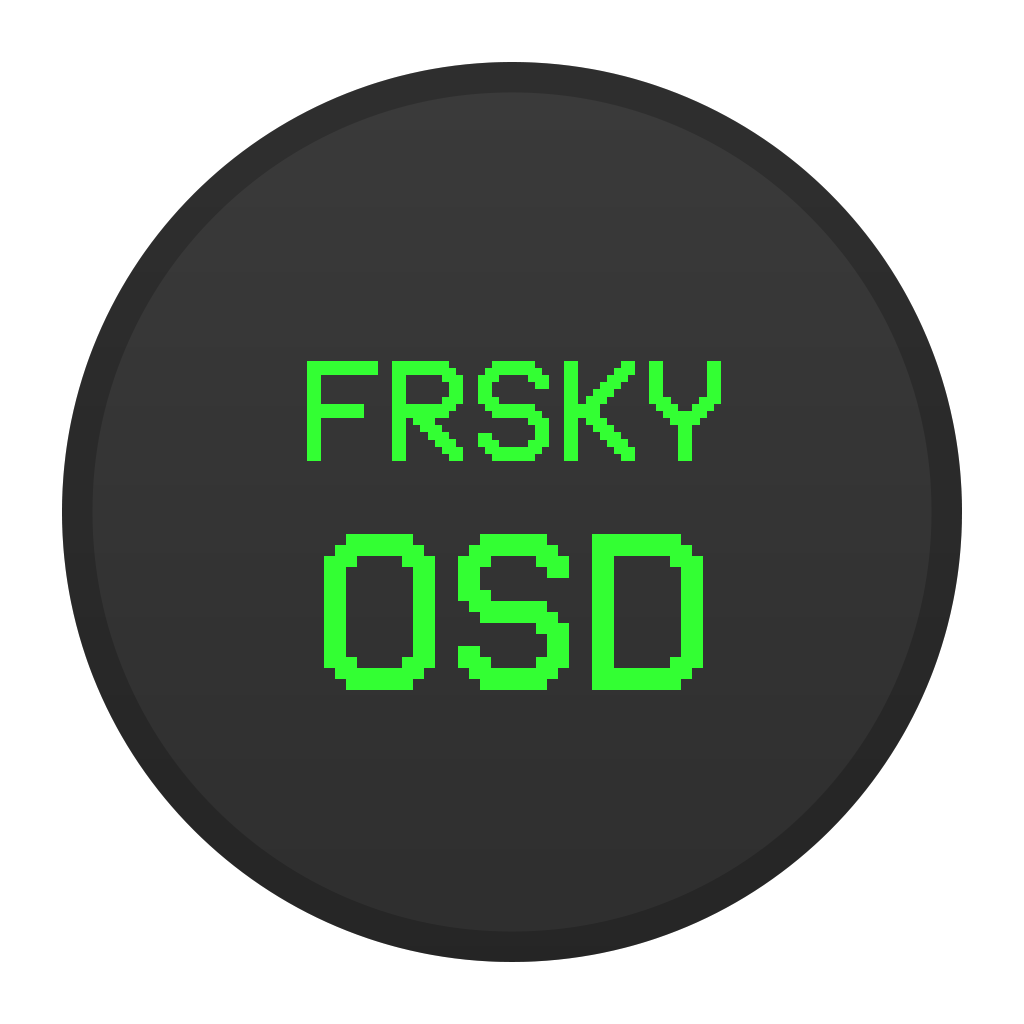
<style>
.page{position:relative;width:1024px;height:1024px;background:#ffffff}
.page>*{position:absolute;margin:0}
.t1{font:146.2px "VCROSDMono";color:#33ff33}
.t2{font:228.4px/233.4px "VCROSDMono";color:#33ff33}
</style>
<div class="page">
<p class="t1" style="left:307px;top:361px;width:414px;height:329px;text-align:center">FRSKY<br><span class="t2">OSD</span></p>
</div>
